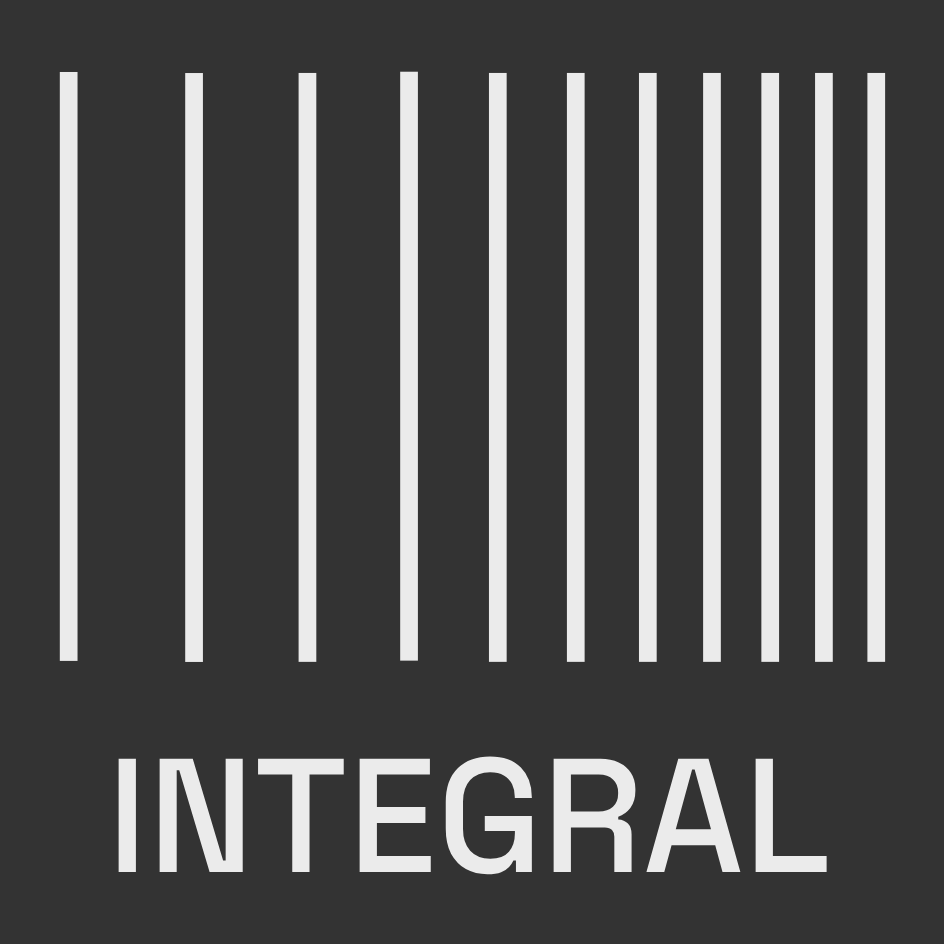
<style>
.page{position:relative;width:944px;height:944px;background:#333333}
.page>*{position:absolute;margin:0}
.t1{font:161.8px "SpaceGroteskLight-Medium";color:#ebebeb}
</style>
<div class="page">
<p class="t1" style="left:118px;top:756px;width:709px;height:119px">INTEGRAL</p>
</div>
